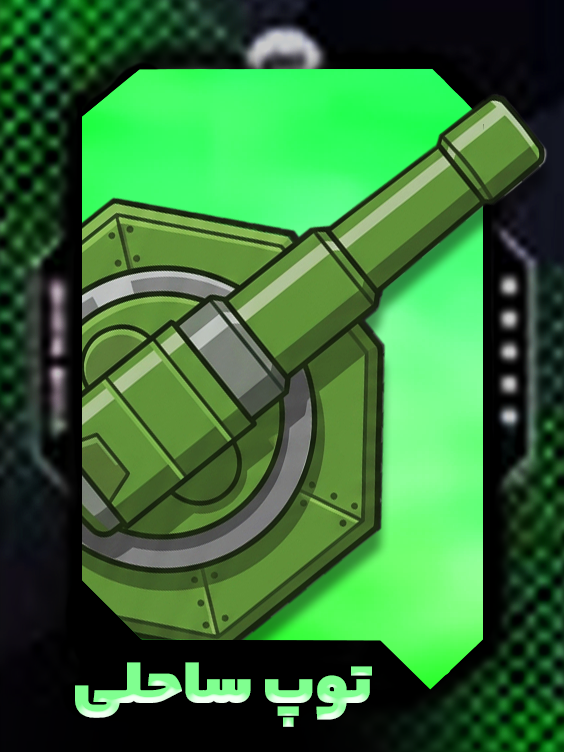
<style>
.page{position:relative;width:564px;height:752px}
.page>*{position:absolute;margin:0}
.t1{font:66.4px "YekanBakh-Fat";letter-spacing:-0.01em;color:#80ff90;text-transform:uppercase;scale:1.1 1}
</style>
<div class="page">
<p class="t1" style="left:75px;top:662px;width:297px;height:65px">توپ  ساحلی</p>
</div>
